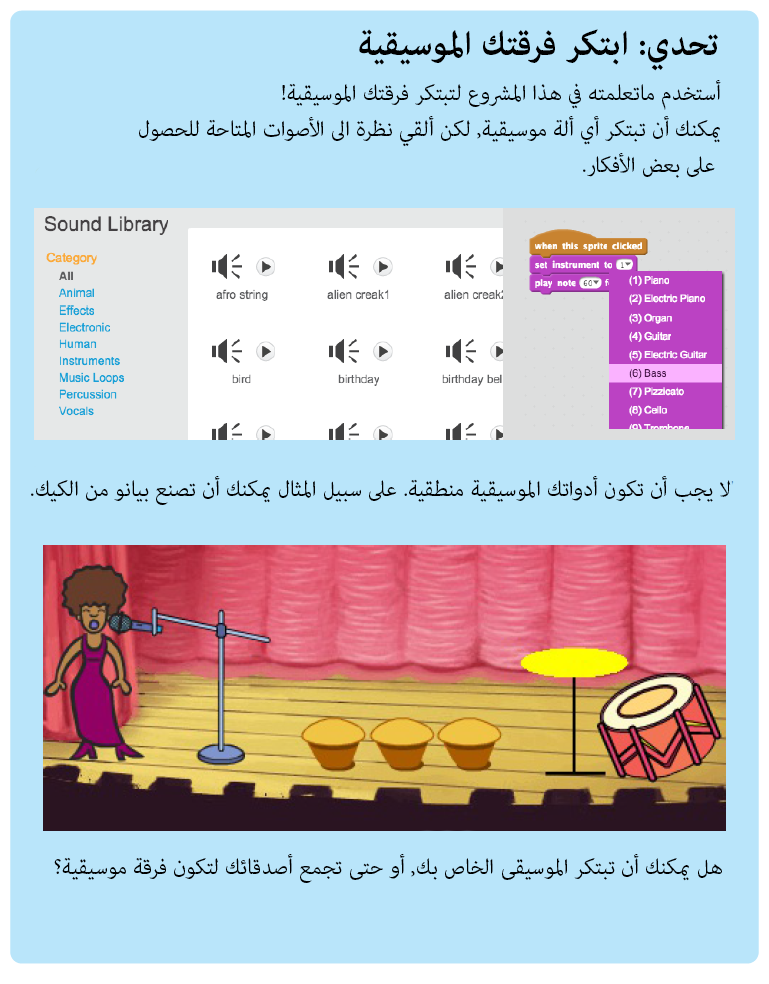
<style>
.page{position:relative;width:769px;height:984px;background:#b9e5fa}
.page>*{position:absolute;margin:0}
.t1{font:48px "AdobeArabic-Bold";color:#000000}
.t2{font:30px "AdobeArabic-Regular";color:#000000}
</style>
<div class="page">
<p class="t1" style="left:359px;top:29px;width:359px;height:42px">تحدي: ابتكر فرقتك الموسيقية</p>
<p class="t2" style="left:139px;top:80px;width:582px;height:98px">أستخدم ماتعلمته في هذا المشروع لتبتكر فرقتك الموسيقية!<br>يمكنك أن تبتكر أي ألة موسيقية, لكن ألقي نظرة الى الأصوات المتاحة للحصول<br> على بعض الأفكار.</p>
<p class="t2" style="left:31px;top:476px;width:700px;height:29px">لا يجب أن تكون أدواتك الموسيقية منطقية. على سبيل المثال يمكنك أن تصنع بيانو من الكيك.</p>
<p class="t2" style="left:54px;top:854px;width:668px;height:29px">هل يمكنك أن تبتكر الموسيقى الخاص بك, أو حتى تجمع أصدقائك لتكون فرقة موسيقية؟</p>
</div>
